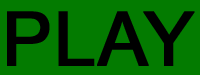
<style>
.page{position:relative;width:200px;height:75px;background:#037b00}
.page>*{position:absolute;margin:0}
.t1{font:75px "ArialMT";color:#000000;font-weight:bold}
</style>
<div class="page">
<p class="t1" style="left:7px;top:11px;width:188px;height:55px">PLAY</p>
</div>
